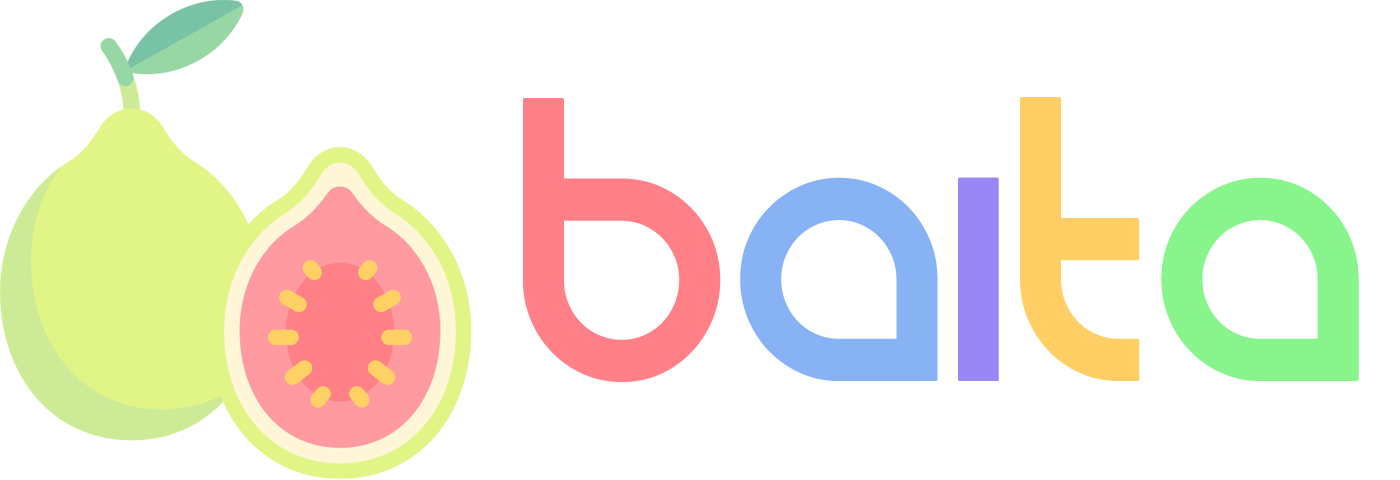
<style>
.page{position:relative;width:1400px;height:480px;background:#ffffff}
.page>*{position:absolute;margin:0}
.t1{font:447.4px "REZ";color:#ff8087;font-weight:bold;scale:0.97 1}
.t2{font:447.4px "REZ";color:#87b3f5;font-weight:bold;scale:0.97 1}
.t3{font:447.4px "REZ";color:#9987f5;font-weight:bold;scale:0.97 1}
.t4{font:447.4px "REZ";color:#ffcf66;font-weight:bold;scale:0.97 1}
.t5{font:447.4px "REZ";color:#87f58c;font-weight:bold;scale:0.97 1}
</style>
<div class="page">
<p class="t1" style="left:523px;top:97px;width:836px;height:285px">b<span class="t2">a</span><span class="t3">i</span><span class="t4">t</span><span class="t5">a</span></p>
</div>
